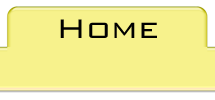
<style>
.page{position:relative;width:215px;height:100px;background:#f7f28c}
.page>*{position:absolute;margin:0}
.t1{font:36px "BankGothicBT-Light";color:#000000}
</style>
<div class="page">
<p class="t1" style="left:60px;top:19px;width:97px;height:19px">Home</p>
</div>
